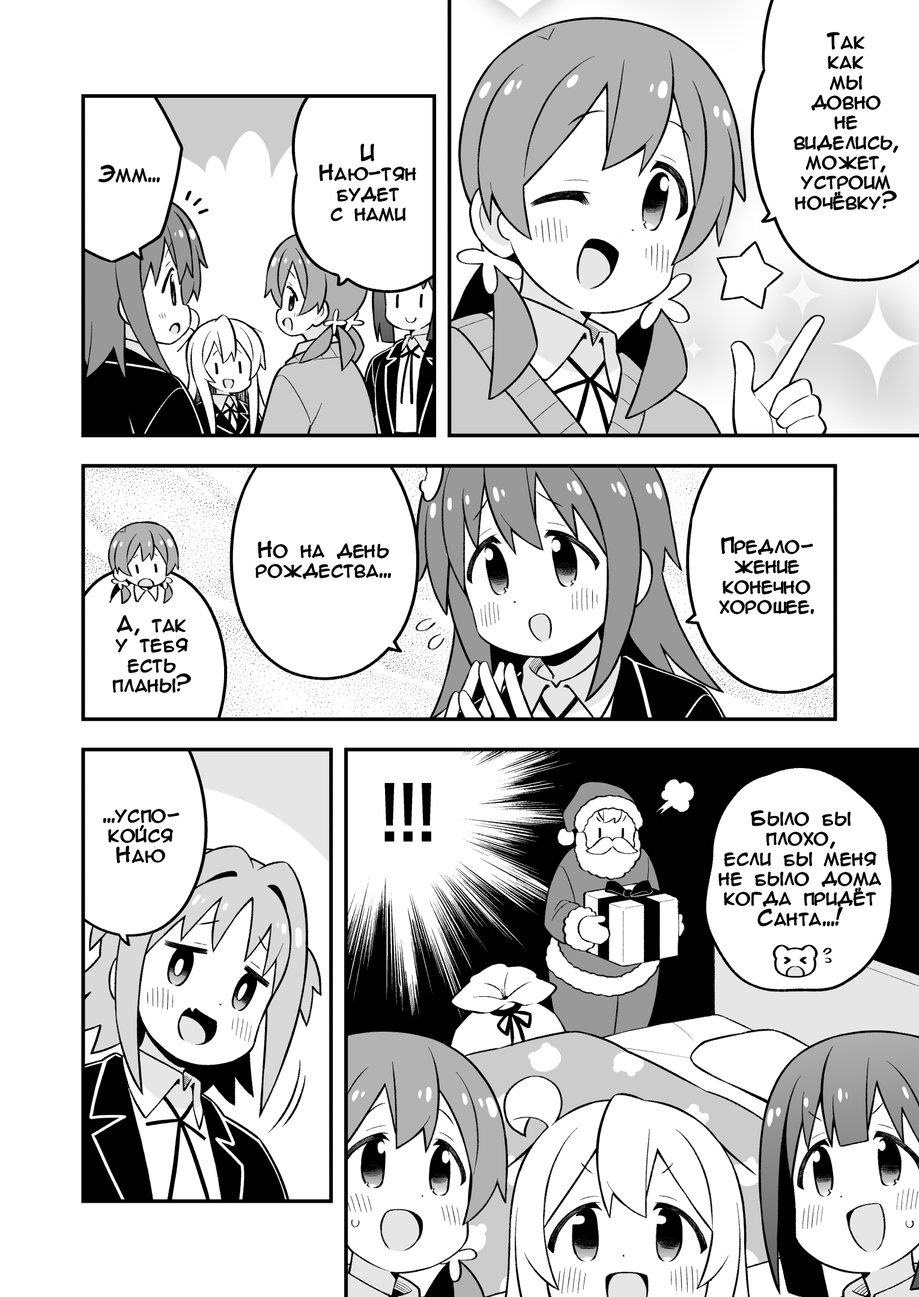
<style>
.page{position:relative;width:919px;height:1297px;background:#ffffff}
.page>*{position:absolute;margin:0}
.t1{font:20px/20px "AnimeAcev3";color:#000000}
.t2{font:20px "AnimeAcev3";color:#000000}
</style>
<div class="page">
<p class="t1" style="left:794px;top:32px;width:104px;height:178px;text-align:center">Так<br>как<br>мы<br>довно<br>не<br>виделись,<br>может,<br>устроим<br>ночёвку?</p>
<p class="t1" style="left:320px;top:144px;width:96px;height:78px;text-align:center">И<br>Наю-тян<br>будет<br>с нами</p>
<p class="t2" style="left:99px;top:165px;width:61px;height:18px">Эмм...</p>
<p class="t1" style="left:256px;top:541px;width:135px;height:38px;text-align:center">Но на день<br>рождества...</p>
<p class="t1" style="left:720px;top:537px;width:94px;height:77px;text-align:center">Предло-<br>жение<br>конечно<br>хорошее.</p>
<p class="t1" style="left:113px;top:616px;width:78px;height:77px;text-align:center">А, так<br>у тебя<br>есть<br>планы?</p>
<p class="t1" style="left:103px;top:809px;width:76px;height:54px;text-align:center">...успо-<br>койся<br>Наю</p>
<p class="t1" style="left:719px;top:811px;width:162px;height:115px;text-align:center">Было бы<br>плохо,<br>если бы меня<br>не было дома<br>когда придёт<br>Санта...!</p>
</div>
